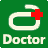
<style>
.page{position:relative;width:48px;height:48px;background:#058026}
.page>*{position:absolute;margin:0}
.t1{font:13.3px "NirmalaUI-Bold";color:#f9f6de}
</style>
<div class="page">
<p class="t1" style="left:3px;top:34px;width:43px;height:10px">Doctor</p>
</div>
